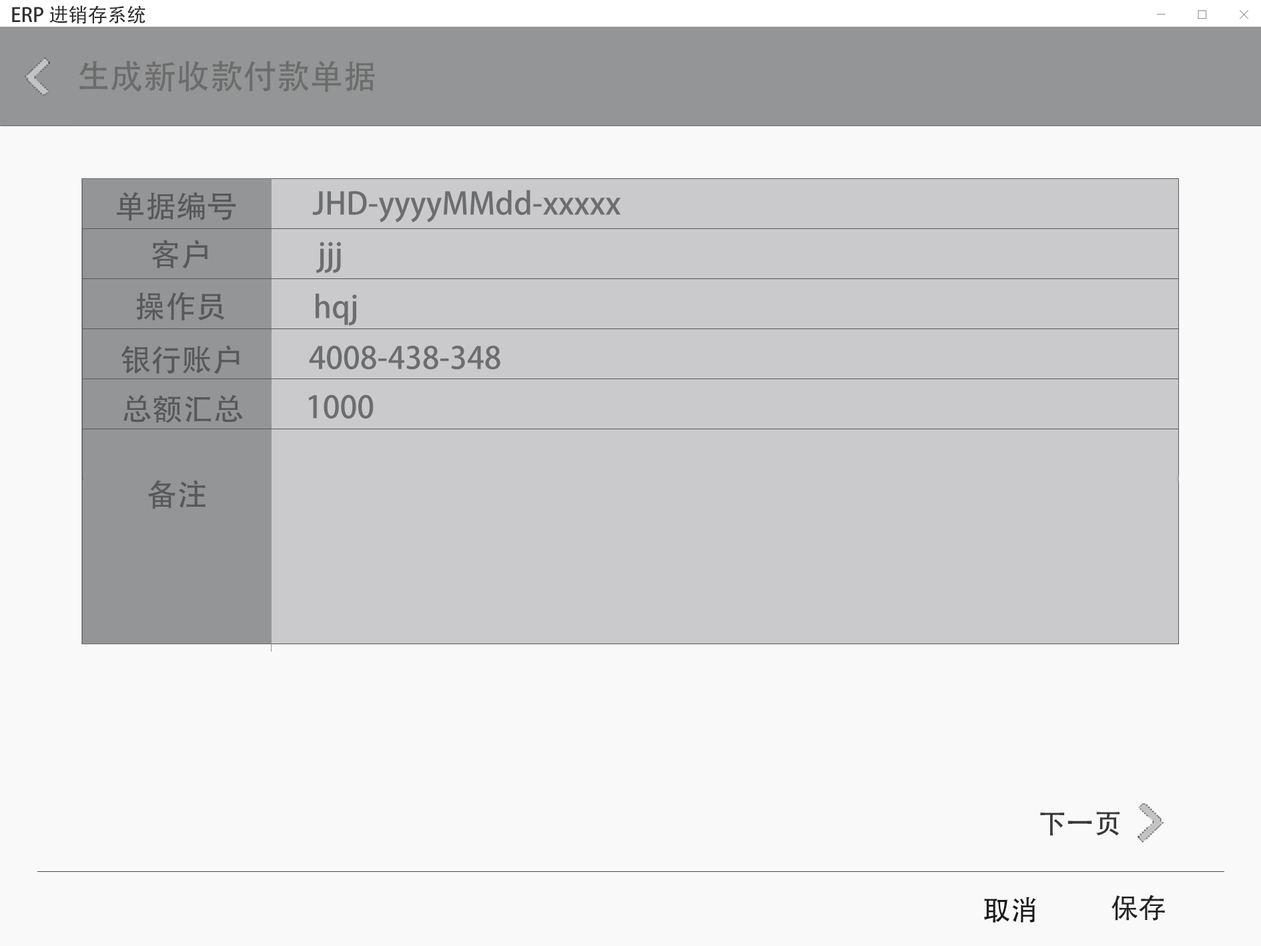
<style>
.page{position:relative;width:1261px;height:946px;background:#f9f9f9}
.page>*{position:absolute;margin:0}
.t1{font:19.5px "AdobeHeitiStd-Regular";color:#2e2e2e}
.t2{font:33.4px "AdobeHeitiStd-Regular";color:#6c6c6c}
.t3{font:30.6px "AdobeHeitiStd-Regular";color:#585859}
.t4{font:30.6px "AdobeHeitiStd-Regular";color:#6c6d6d}
.t5{font:27.8px "AdobeHeitiStd-Regular";color:#3a3839}
.t6{font:27.8px "AdobeHeitiStd-Regular";color:#1b1a1a}
.t7{font:27.8px "AdobeHeitiStd-Regular";color:#242323}
</style>
<div class="page">
<p class="t1" style="left:12px;top:5px;width:133px;height:19px">ERP进销存系统</p>
<p class="t2" style="left:79px;top:61px;width:296px;height:31px">生成新收款付款单据</p>
<p class="t3" style="left:117px;top:192px;width:119px;height:29px">单据编号</p>
<p class="t4" style="left:312px;top:190px;width:309px;height:32px">JHD-yyyyMMdd-xxxxx</p>
<p class="t3" style="left:151px;top:240px;width:57px;height:28px">客户</p>
<p class="t4" style="left:316px;top:242px;width:25px;height:31px">jjj</p>
<p class="t3" style="left:136px;top:292px;width:89px;height:28px">操作员</p>
<p class="t4" style="left:316px;top:293px;width:41px;height:33px">hqj</p>
<p class="t3" style="left:121px;top:345px;width:119px;height:29px">银行账户</p>
<p class="t4" style="left:309px;top:345px;width:191px;height:25px">4008-438-348</p>
<p class="t3" style="left:123px;top:394px;width:120px;height:29px">总额汇总</p>
<p class="t4" style="left:308px;top:394px;width:66px;height:24px">1000</p>
<p class="t3" style="left:147px;top:480px;width:59px;height:28px">备注</p>
<p class="t5" style="left:1040px;top:811px;width:80px;height:24px">下一页</p>
<p class="t6" style="left:984px;top:896px;width:52px;height:26px">取消</p>
<p class="t7" style="left:1112px;top:894px;width:53px;height:26px">保存</p>
</div>
